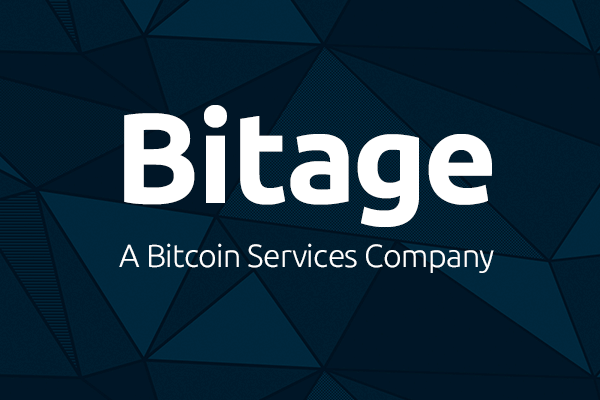
<style>
.page{position:relative;width:600px;height:400px;background:#001627}
.page>*{position:absolute;margin:0}
.t1{font:128px "Ubuntu-Bold";color:#ffffff}
.t2{font:32px "Ubuntu-Light";letter-spacing:-0.02em;color:#ffffff}
</style>
<div class="page">
<p class="t1" style="left:124px;top:105px;width:368px;height:122px">Bitage</p>
<p class="t2" style="left:119px;top:243px;width:375px;height:30px">A Bitcoin Services Company</p>
</div>
